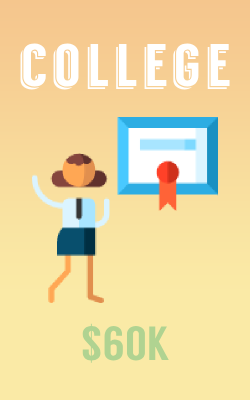
<style>
.page{position:relative;width:250px;height:400px;background:#faeaa6}
.page>*{position:absolute;margin:0}
.t1{font:60px "Langdon";letter-spacing:0.081em;color:#ffffff}
.t2{font:48px "Langdon";color:#b0d391}
</style>
<div class="page">
<p class="t1" style="left:20px;top:43px;width:210px;height:47px">college</p>
<p class="t2" style="left:82px;top:323px;width:87px;height:40px">$60K</p>
</div>
